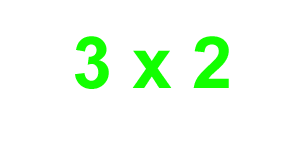
<style>
.page{position:relative;width:300px;height:150px;background:#ffffff}
.page>*{position:absolute;margin:0}
.t1{font:72px "Arial-BoldMT";color:#12ff00}
</style>
<div class="page">
<p class="t1" style="left:75px;top:36px;width:154px;height:53px">3 x 2</p>
</div>
